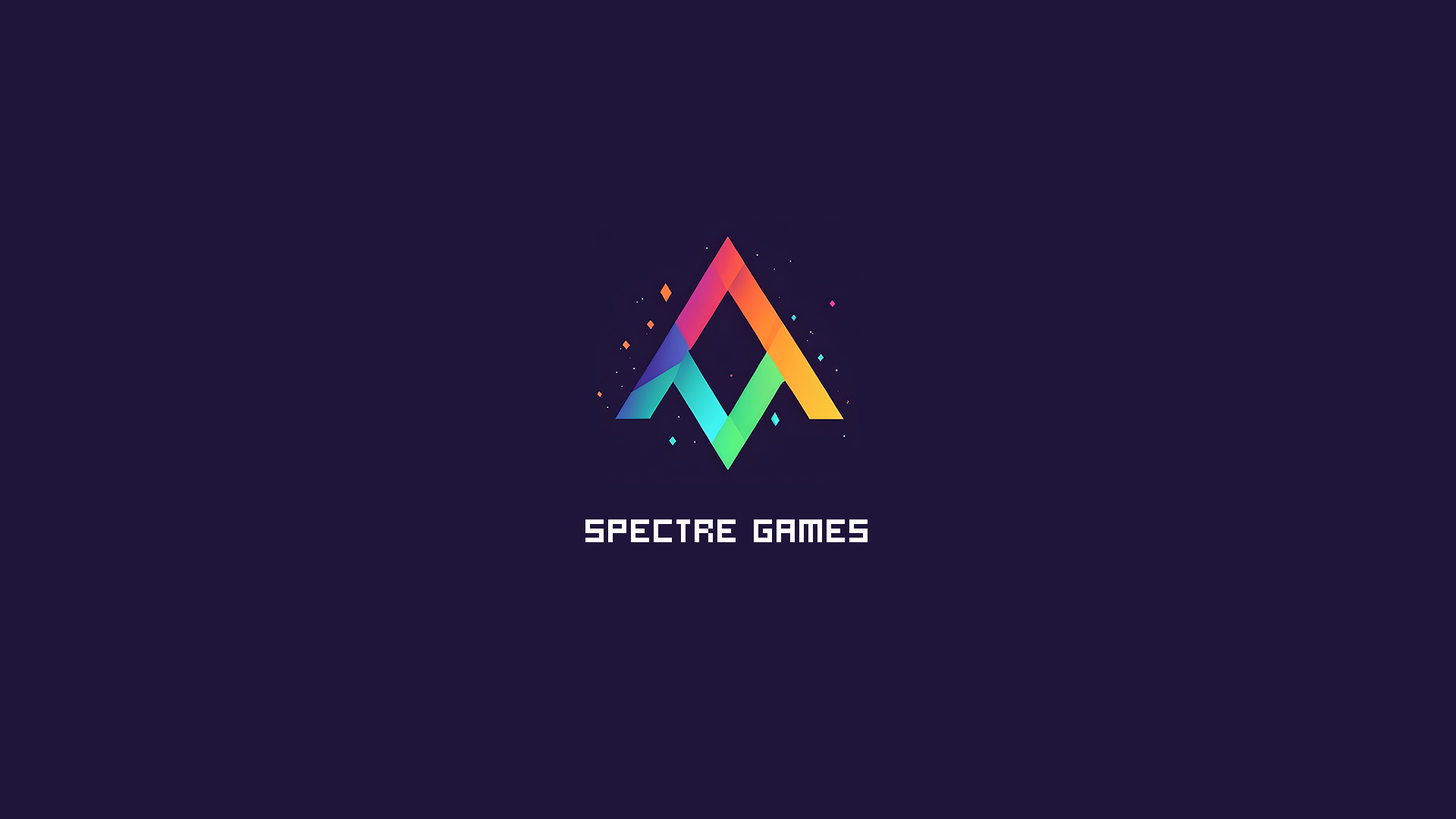
<style>
.page{position:relative;width:1456px;height:819px;background:#1d153a}
.page>*{position:absolute;margin:0}
.t1{font:36.4px "Hooge0555";color:#fefefe}
</style>
<div class="page">
<p class="t1" style="left:585px;top:519px;width:283px;height:23px">Spectre Games</p>
</div>
